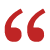
<style>
.page{position:relative;width:50px;height:50px;background:#ffffff}
.page>*{position:absolute;margin:0}
.t1{font:125px "Georgia";color:#bf2525}
</style>
<div class="page">
<p class="t1" style="left:4px;top:8px;width:42px;height:34px">“</p>
</div>
